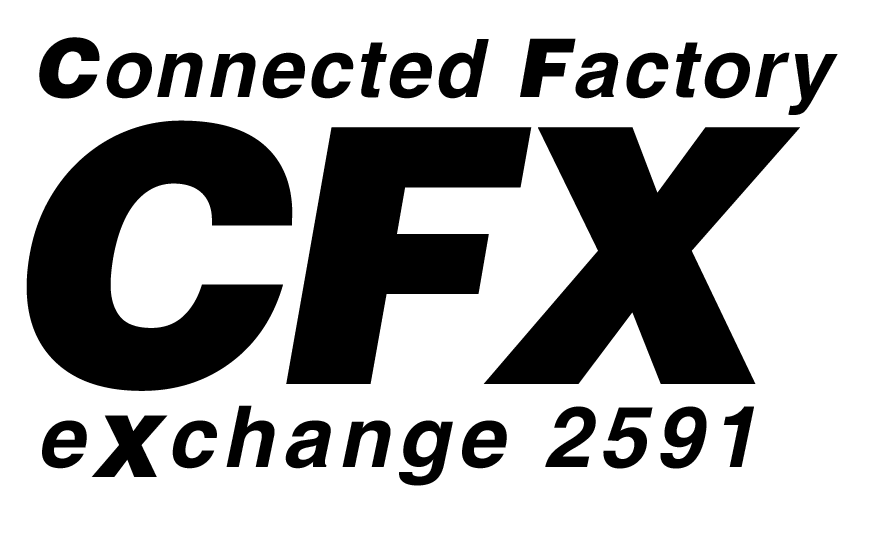
<style>
.page{position:relative;width:869px;height:535px;background:#ffffff}
.page>*{position:absolute;margin:0}
.t1{font:80.8px "Helvetica-BoldOblique";letter-spacing:0.04em;color:#000000}
.t2{font:80.8px "Helvetica-BlackOblique";letter-spacing:0.04em;color:#000000}
.t3{font:356.2px "Helvetica-BlackOblique";letter-spacing:-0.045em;color:#000000}
.t4{font:85.5px "Helvetica-BoldOblique";letter-spacing:0.09em;color:#000000}
.t5{font:85.5px "Helvetica-BlackOblique";letter-spacing:0.09em;color:#000000}
</style>
<div class="page">
<p class="t1" style="left:39px;top:37px;width:799px;height:78px"><span class="t2">C</span>onnected<span class="t2"> F</span>actory</p>
<p class="t3" style="left:26px;top:120px;width:774px;height:271px">CFX</p>
<p class="t4" style="left:172px;top:405px;width:582px;height:81px">change 2591</p>
<p class="t4" style="left:42px;top:420px;width:45px;height:49px">e</p>
<p class="t5" style="left:91px;top:415px;width:77px;height:62px">X</p>
</div>
